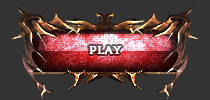
<style>
.page{position:relative;width:210px;height:100px;background:#333333}
.page>*{position:absolute;margin:0}
.t1{font:12px "Barkentina";letter-spacing:0.1em;color:#fffffe;text-transform:uppercase;font-weight:bold}
</style>
<div class="page">
<p class="t1" style="left:89px;top:46px;width:33px;height:9px">Play</p>
</div>
